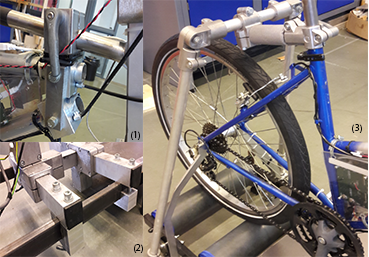
<style>
.page{position:relative;width:369px;height:257px}
.page>*{position:absolute;margin:0}
.t1{font:10px "MyriadPro-Regular";color:#080707}
</style>
<div class="page">
<p class="t1" style="left:352px;top:124px;width:10px;height:9px">(3)</p>
<p class="t1" style="left:131px;top:131px;width:9px;height:9px">(1)</p>
<p class="t1" style="left:134px;top:244px;width:9px;height:9px">(2)</p>
</div>
